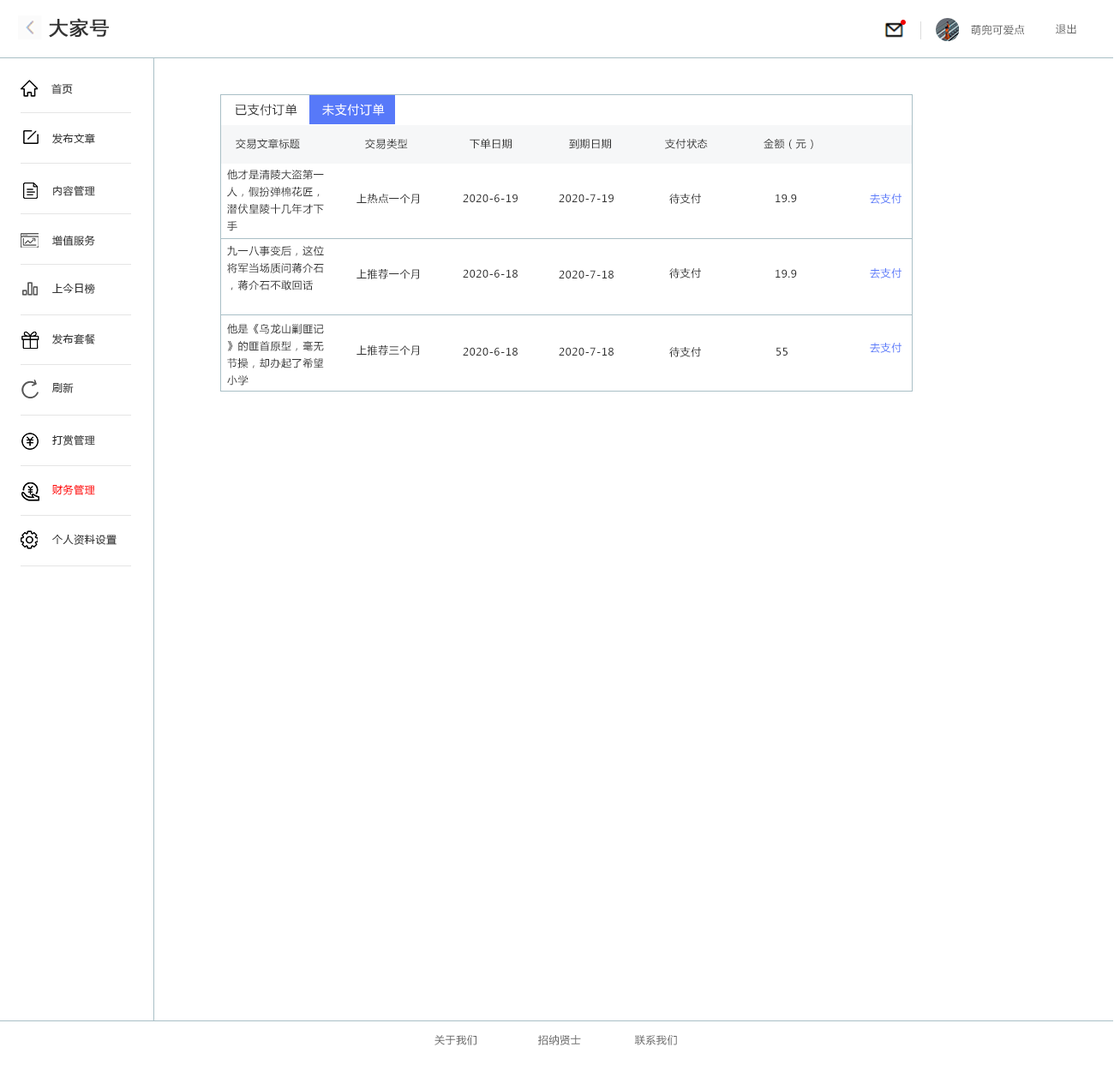
<style>
.page{position:relative;width:1114px;height:1071px;background:#ffffff}
.page>*{position:absolute;margin:0}
.t1{font:18.8px "MicrosoftYaHei";letter-spacing:0.05em;color:#333333;font-weight:bold}
.t2{font:10.3px "MicrosoftYaHei";letter-spacing:0.05em;color:#666666}
.t3{font:10.3px "MicrosoftYaHei";letter-spacing:0.05em;color:#333333}
.t4{font:12px "MicrosoftYaHei";letter-spacing:0.05em;color:#333333}
.t5{font:12px "MicrosoftYaHei";letter-spacing:0.05em;color:#ffffff}
.t6{font:10.3px/0px "MicrosoftYaHei";letter-spacing:0.05em;color:#333333}
.t7{font:10.3px/57.4px "MicrosoftYaHei";letter-spacing:0.05em;color:#5779f9}
.t8{font:10.3px "MicrosoftYaHei";letter-spacing:0.05em;color:#ff0000}
</style>
<div class="page">
<p class="t1" style="left:49px;top:18px;width:60px;height:20px">大家号</p>
<p class="t2" style="left:971px;top:25px;width:54px;height:10px">萌兜可爱点</p>
<p class="t2" style="left:1055px;top:24px;width:21px;height:10px">退出</p>
<p class="t3" style="left:51px;top:83px;width:22px;height:11px">首页</p>
<p class="t4" style="left:236px;top:104px;width:61px;height:12px">已支付订单</p>
<p class="t5" style="left:322px;top:104px;width:63px;height:12px">未支付订单</p>
<p class="t3" style="left:52px;top:133px;width:43px;height:11px">发布文章</p>
<p class="t3" style="left:469px;top:138px;width:42px;height:11px">下单日期</p>
<p class="t3" style="left:236px;top:139px;width:64px;height:10px">交易文章标题</p>
<p class="t3" style="left:365px;top:139px;width:43px;height:10px">交易类型</p>
<p class="t3" style="left:569px;top:139px;width:42px;height:10px">到期日期</p>
<p class="t3" style="left:665px;top:139px;width:43px;height:10px">支付状态</p>
<p class="t3" style="left:763px;top:139px;width:50px;height:10px">金额（元）</p>
<p class="t6" style="left:227px;top:169px;width:97px;height:62px">他才是清陵大盗第一<br>人，假扮弹棉花匠，<br>潜伏皇陵十几年才下<br>手</p>
<p class="t3" style="left:53px;top:185px;width:42px;height:11px">内容管理</p>
<p class="t3" style="left:356px;top:194px;width:63px;height:10px">上热点一个月</p>
<p class="t3" style="left:463px;top:194px;width:54px;height:8px">2020-6-19</p>
<p class="t3" style="left:559px;top:194px;width:54px;height:8px">2020-7-19</p>
<p class="t3" style="left:669px;top:194px;width:32px;height:10px">待支付</p>
<p class="t3" style="left:775px;top:194px;width:22px;height:8px">19.9</p>
<p class="t7" style="left:869px;top:194px;width:32px;height:159px">去支付<br>去支付<br>去支付</p>
<p class="t3" style="left:52px;top:235px;width:43px;height:11px">增值服务</p>
<p class="t6" style="left:227px;top:245px;width:97px;height:45px">九一八事变后，这位<br>将军当场质问蒋介石<br>，蒋介石不敢回话</p>
<p class="t3" style="left:356px;top:269px;width:63px;height:10px">上推荐一个月</p>
<p class="t3" style="left:463px;top:269px;width:54px;height:9px">2020-6-18</p>
<p class="t3" style="left:559px;top:270px;width:54px;height:8px">2020-7-18</p>
<p class="t3" style="left:669px;top:268px;width:32px;height:10px">待支付</p>
<p class="t3" style="left:775px;top:269px;width:22px;height:9px">19.9</p>
<p class="t3" style="left:52px;top:283px;width:43px;height:11px">上今日榜</p>
<p class="t6" style="left:227px;top:323px;width:97px;height:62px">他是《乌龙山剿匪记<br>》的匪首原型，毫无<br>节操，却办起了希望<br>小学</p>
<p class="t3" style="left:52px;top:333px;width:43px;height:11px">发布套餐</p>
<p class="t3" style="left:356px;top:345px;width:63px;height:10px">上推荐三个月</p>
<p class="t3" style="left:463px;top:347px;width:54px;height:8px">2020-6-18</p>
<p class="t3" style="left:559px;top:347px;width:54px;height:8px">2020-7-18</p>
<p class="t3" style="left:669px;top:347px;width:32px;height:10px">待支付</p>
<p class="t3" style="left:776px;top:347px;width:11px;height:8px">55</p>
<p class="t3" style="left:52px;top:383px;width:22px;height:10px">刷新</p>
<p class="t3" style="left:52px;top:434px;width:43px;height:11px">打赏管理</p>
<p class="t8" style="left:52px;top:484px;width:43px;height:11px">财务管理</p>
<p class="t3" style="left:52px;top:534px;width:65px;height:11px">个人资料设置</p>
<p class="t2" style="left:434px;top:1035px;width:243px;height:10px">关于我们                 招纳贤士               联系我们</p>
</div>
